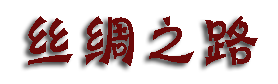
<style>
.page{position:relative;width:278px;height:84px;background:#ffffff}
.page>*{position:absolute;margin:0}
.t1{font:60px "HYn3gj";letter-spacing:0.01em;color:#6c0909}
</style>
<div class="page">
<p class="t1" style="left:28px;top:16px;width:230px;height:50px">丝绸之路</p>
</div>
